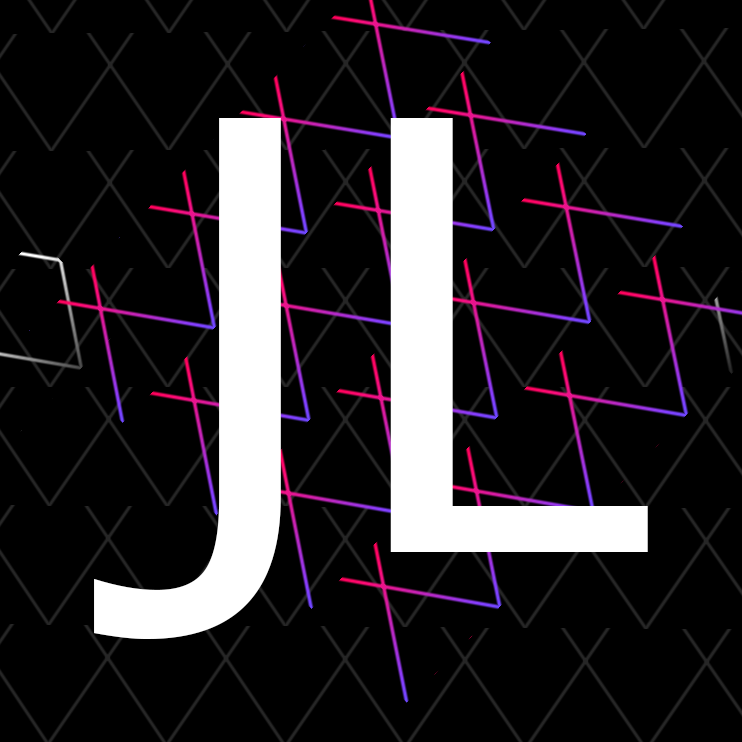
<style>
.page{position:relative;width:742px;height:742px;background:#000000}
.page>*{position:absolute;margin:0}
.t1{font:600px "LucidaSansUnicode";color:#ffffff}
</style>
<div class="page">
<p class="t1" style="left:94px;top:118px;width:554px;height:521px">JL</p>
</div>
